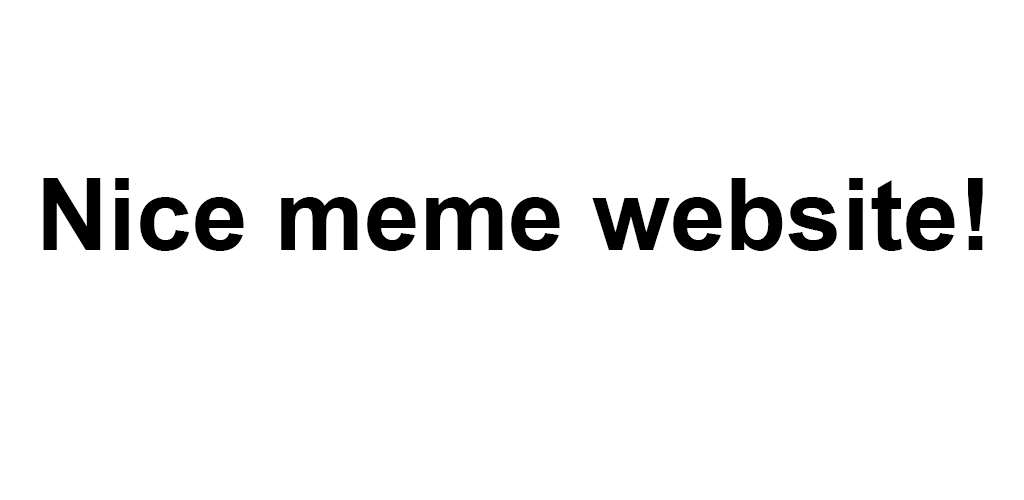
<style>
.page{position:relative;width:1024px;height:500px;background:#ffffff}
.page>*{position:absolute;margin:0}
.t1{font:100px "Arial-BoldMT";color:#000000}
</style>
<div class="page">
<p class="t1" style="left:43px;top:178px;width:940px;height:73px">Nice meme website!</p>
</div>
